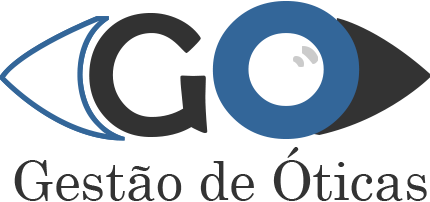
<style>
.page{position:relative;width:430px;height:202px;background:#ffffff}
.page>*{position:absolute;margin:0}
.t1{font:279.6px "BerlinSansFB-Reg";color:#336699;scale:1.1 1}
.t2{font:174.2px "BerlinSansFB-Reg";color:#323232;scale:1.09 1}
.t3{font:252.9px "BerlinSansFB-Reg";color:#336699;scale:1.11 1}
.t4{font:53.6px "Century";color:#333333}
</style>
<div class="page">
<p class="t1" style="left:212px;top:0px;width:148px;height:139px">o</p>
<p class="t2" style="left:89px;top:13px;width:119px;height:124px">G</p>
<p class="t3" style="left:219px;top:7px;width:134px;height:125px">o</p>
<p class="t4" style="left:14px;top:147px;width:413px;height:54px">Gestão de Óticas</p>
</div>
